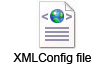
<style>
.page{position:relative;width:111px;height:65px;background:#ffffff}
.page>*{position:absolute;margin:0}
.t1{font:12px "ArialMT";color:#000000}
</style>
<div class="page">
<p class="t1" style="left:13px;top:53px;width:78px;height:11px">XMLConfig file</p>
</div>
